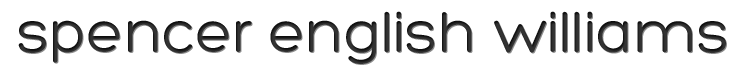
<style>
.page{position:relative;width:750px;height:75px;background:#ffffff}
.page>*{position:absolute;margin:0}
.t1{font:60px "Hero";color:#333333}
</style>
<div class="page">
<p class="t1" style="left:18px;top:11px;width:708px;height:53px">spencer english williams</p>
</div>
